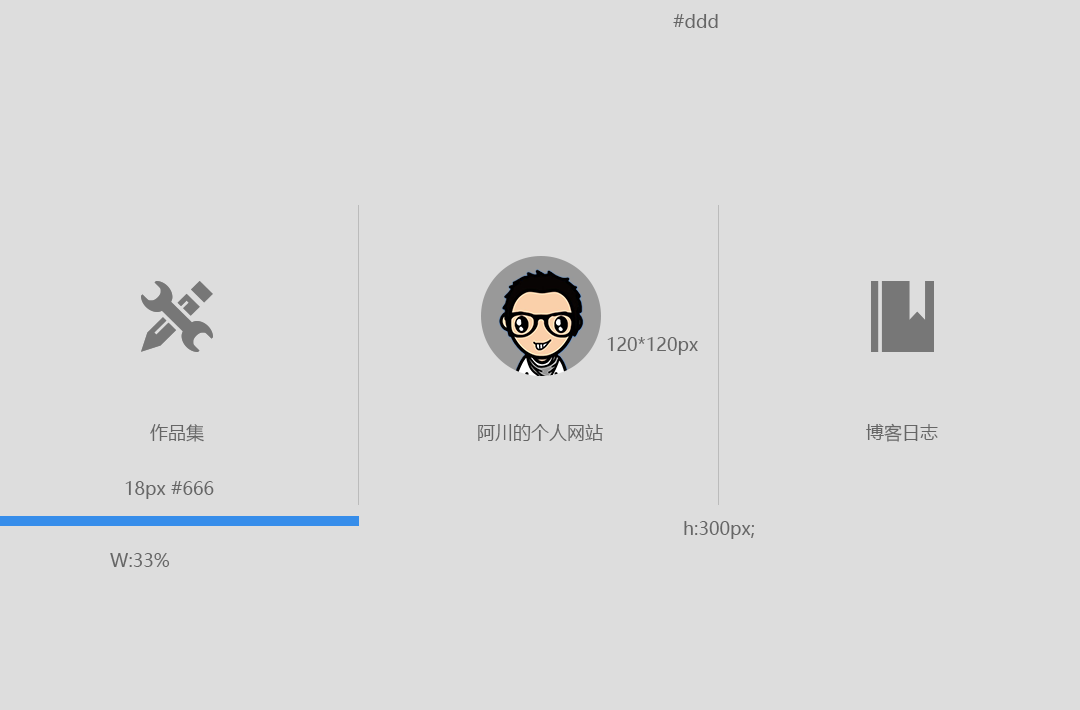
<style>
.page{position:relative;width:1080px;height:710px;background:#dddddd}
.page>*{position:absolute;margin:0}
.t1{font:18px "MicrosoftYaHei";color:#666666}
</style>
<div class="page">
<p class="t1" style="left:673px;top:14px;width:45px;height:14px">#ddd</p>
<p class="t1" style="left:607px;top:337px;width:91px;height:18px">120*120px</p>
<p class="t1" style="left:150px;top:424px;width:54px;height:18px">作品集</p>
<p class="t1" style="left:478px;top:424px;width:125px;height:17px">阿川的个人网站</p>
<p class="t1" style="left:866px;top:423px;width:72px;height:19px">博客日志</p>
<p class="t1" style="left:125px;top:481px;width:89px;height:18px">18px #666</p>
<p class="t1" style="left:684px;top:521px;width:70px;height:18px">h:300px;</p>
<p class="t1" style="left:110px;top:553px;width:60px;height:14px">W:33%</p>
</div>
